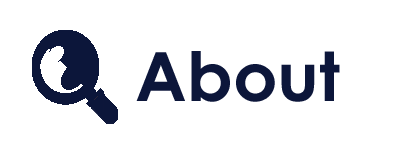
<style>
.page{position:relative;width:400px;height:150px;background:#ffffff}
.page>*{position:absolute;margin:0}
.t1{font:67.9px "CenturyGothic-Bold";color:#0c163a}
</style>
<div class="page">
<p class="t1" style="left:136px;top:51px;width:204px;height:51px">About</p>
</div>
